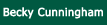
<style>
.page{position:relative;width:107px;height:25px;background:#005941}
.page>*{position:absolute;margin:0}
.t1{font:11px "Tahoma";letter-spacing:0.02em;color:#ffffff;font-weight:bold}
</style>
<div class="page">
<p class="t1" style="left:3px;top:7px;width:100px;height:12px">Becky Cunningham</p>
</div>
